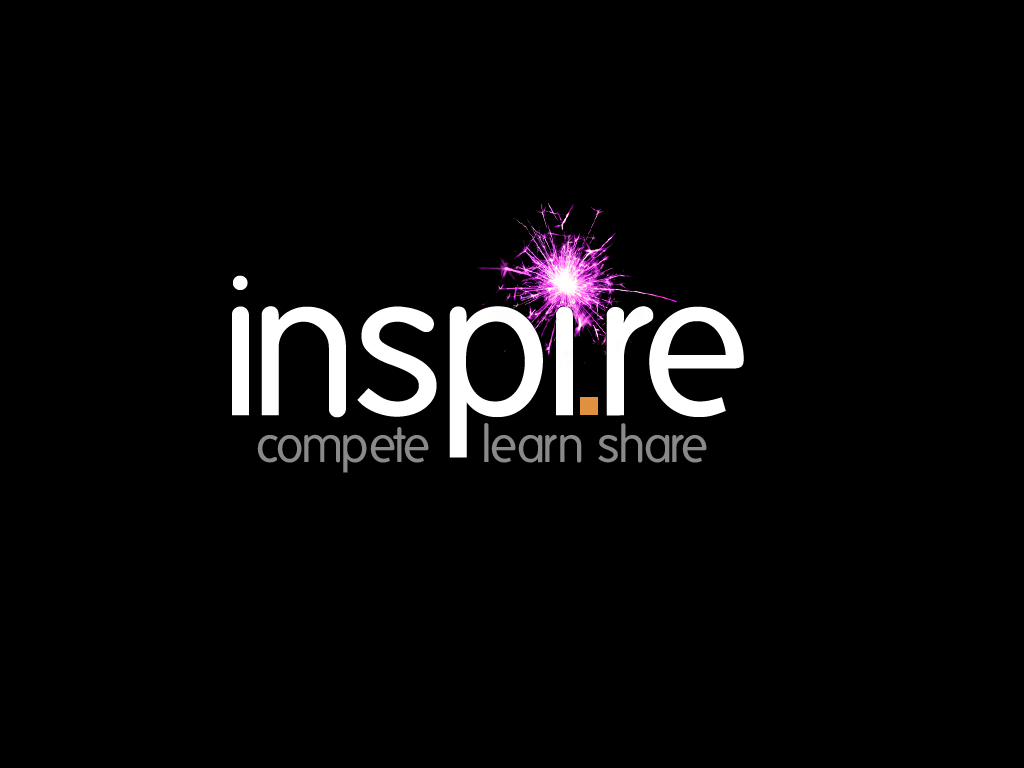
<style>
.page{position:relative;width:1024px;height:768px;background:#000000}
.page>*{position:absolute;margin:0}
.t1{font:200px "Folks-Normal";color:#ffffff}
.t2{font:50px "Folks-Normal";color:#898989}
</style>
<div class="page">
<p class="t1" style="left:232px;top:275px;width:512px;height:183px">inspi re</p>
<p class="t2" style="left:257px;top:423px;width:450px;height:50px">compete    learn share</p>
</div>
